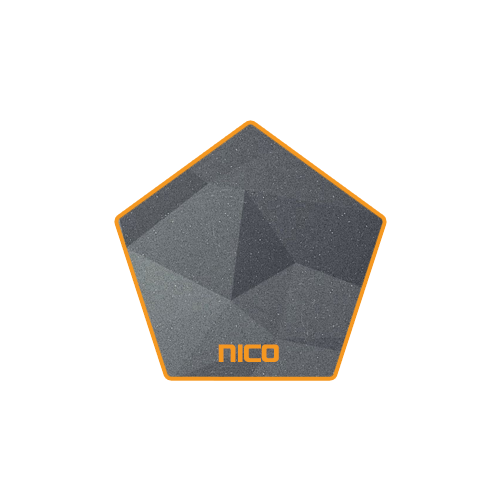
<style>
.page{position:relative;width:500px;height:500px;background:#ffffff}
.page>*{position:absolute;margin:0}
.t1{font:22px "HyundaiNormal";color:#f49720}
</style>
<div class="page">
<p class="t1" style="left:218px;top:344px;width:61px;height:18px">Nico</p>
</div>
